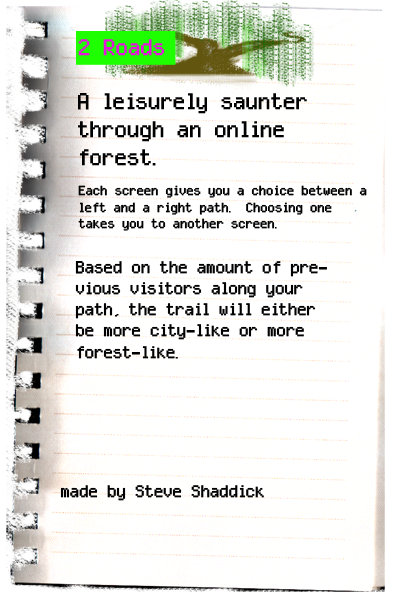
<style>
.page{position:relative;width:396px;height:600px;background:#ffffff}
.page>*{position:absolute;margin:0}
.t1{font:23.5px "Sydnie";color:#e714e0;font-weight:bold}
.t2{font:23.5px "Sydnie";color:#000000;font-weight:bold}
.t3{font:13.7px "Sydnie";color:#000000;font-weight:bold}
.t4{font:17.6px "Sydnie";color:#000000;font-weight:bold}
</style>
<div class="page">
<p class="t1" style="left:78px;top:39px;width:86px;height:17px">2 Roads</p>
<p class="t2" style="left:78px;top:93px;width:229px;height:73px">A leisurely saunter through an online forest.</p>
<p class="t3" style="left:78px;top:185px;width:289px;height:46px">Each screen gives you a choice between a left and a right path.  Choosing one takes you to another screen.</p>
<p class="t4" style="left:75px;top:261px;width:252px;height:98px">Based on the amount of previous visitors along your path, the trail will either be more city-like or more forest-like.</p>
<p class="t4" style="left:60px;top:485px;width:204px;height:16px">made by Steve Shaddick</p>
</div>
